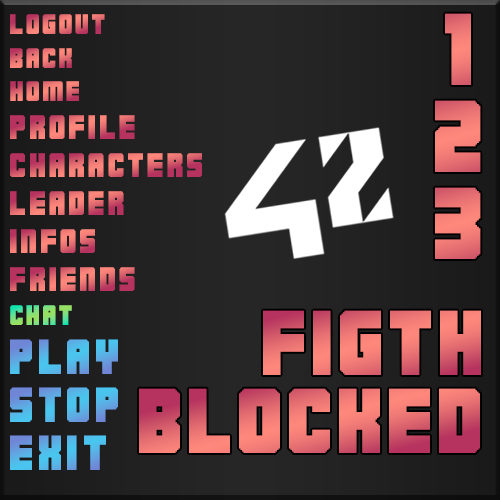
<style>
.page{position:relative;width:500px;height:500px}
.page>*{position:absolute;margin:0}
.t1{font:20px "M23_HYDRANT-SPECIAL";letter-spacing:0.1em}
.t2{font:72px "M23_HYDRANT-SPECIAL";letter-spacing:0.1em;color:#eb7574}
.t3{font:72px "M23_HYDRANT-SPECIAL";letter-spacing:0.1em;color:#ec7674}
.t4{font:24px "M23_HYDRANT-SPECIAL";letter-spacing:0.1em}
.t5{font:65px "M23_HYDRANT-SPECIAL";letter-spacing:0.05em}
.t6{font:35px "M23_HYDRANT-SPECIAL";letter-spacing:0.1em;color:#59b1e6}
.t7{font:35px "M23_HYDRANT-SPECIAL";letter-spacing:0.1em;color:#59b2e6}
.t8{font:35px "M23_HYDRANT-SPECIAL";letter-spacing:0.1em;color:#56b6e8}
</style>
<div class="page">
<p class="t1" style="left:10px;top:14px;width:95px;height:20px">LOGOUT</p>
<p class="t2" style="left:445px;top:13px;width:26px;height:72px">1</p>
<p class="t1" style="left:10px;top:48px;width:62px;height:20px">BACK</p>
<p class="t1" style="left:10px;top:81px;width:69px;height:20px">HOME</p>
<p class="t3" style="left:435px;top:100px;width:46px;height:72px">2</p>
<p class="t4" style="left:10px;top:115px;width:125px;height:24px">PROFILE</p>
<p class="t4" style="left:10px;top:153px;width:192px;height:24px">CHARACTERS</p>
<p class="t4" style="left:10px;top:191px;width:114px;height:24px">LEADER</p>
<p class="t2" style="left:435px;top:187px;width:46px;height:72px">3</p>
<p class="t4" style="left:10px;top:229px;width:85px;height:24px">INFOS</p>
<p class="t4" style="left:10px;top:267px;width:125px;height:24px">FRIENDS</p>
<p class="t1" style="left:10px;top:305px;width:62px;height:20px">CHAT</p>
<p class="t5" style="left:263px;top:310px;width:218px;height:65px">FIGTH</p>
<p class="t6" style="left:10px;top:339px;width:108px;height:35px">PLAY</p>
<p class="t7" style="left:10px;top:387px;width:108px;height:35px">STOP</p>
<p class="t5" style="left:139px;top:388px;width:341px;height:65px">BLOCKED</p>
<p class="t8" style="left:10px;top:435px;width:96px;height:35px">EXIT</p>
</div>
